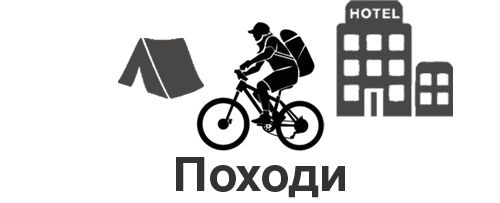
<style>
.page{position:relative;width:500px;height:203px;background:#ffffff}
.page>*{position:absolute;margin:0}
.t1{font:48px "HelveticaLTStd-Bold";color:#333333}
</style>
<div class="page">
<p class="t1" style="left:176px;top:157px;width:169px;height:41px">Походи</p>
</div>
